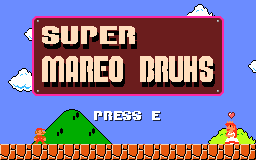
<style>
.page{position:relative;width:256px;height:160px;background:#6b8cff}
.page>*{position:absolute;margin:0}
.t1{font:22px "SuperMarioBrosAlphabet";letter-spacing:0.02em;color:#ffdebd;scale:2.85 1}
.t2{font:32px "SuperMarioBrosAlphabet";letter-spacing:0.02em;color:#ffdebd;scale:1.53 1}
.t3{font:18.4px "SuperMarioBrosAlphabet";letter-spacing:0.02em;color:#ffffff;scale:1.66 1}
</style>
<div class="page">
<p class="t1" style="left:42px;top:26px;width:93px;height:18px">SUPER</p>
<p class="t2" style="left:42px;top:56px;width:171px;height:26px">MAREO BRUHS</p>
<p class="t3" style="left:94px;top:111px;width:66px;height:9px">press e</p>
</div>
